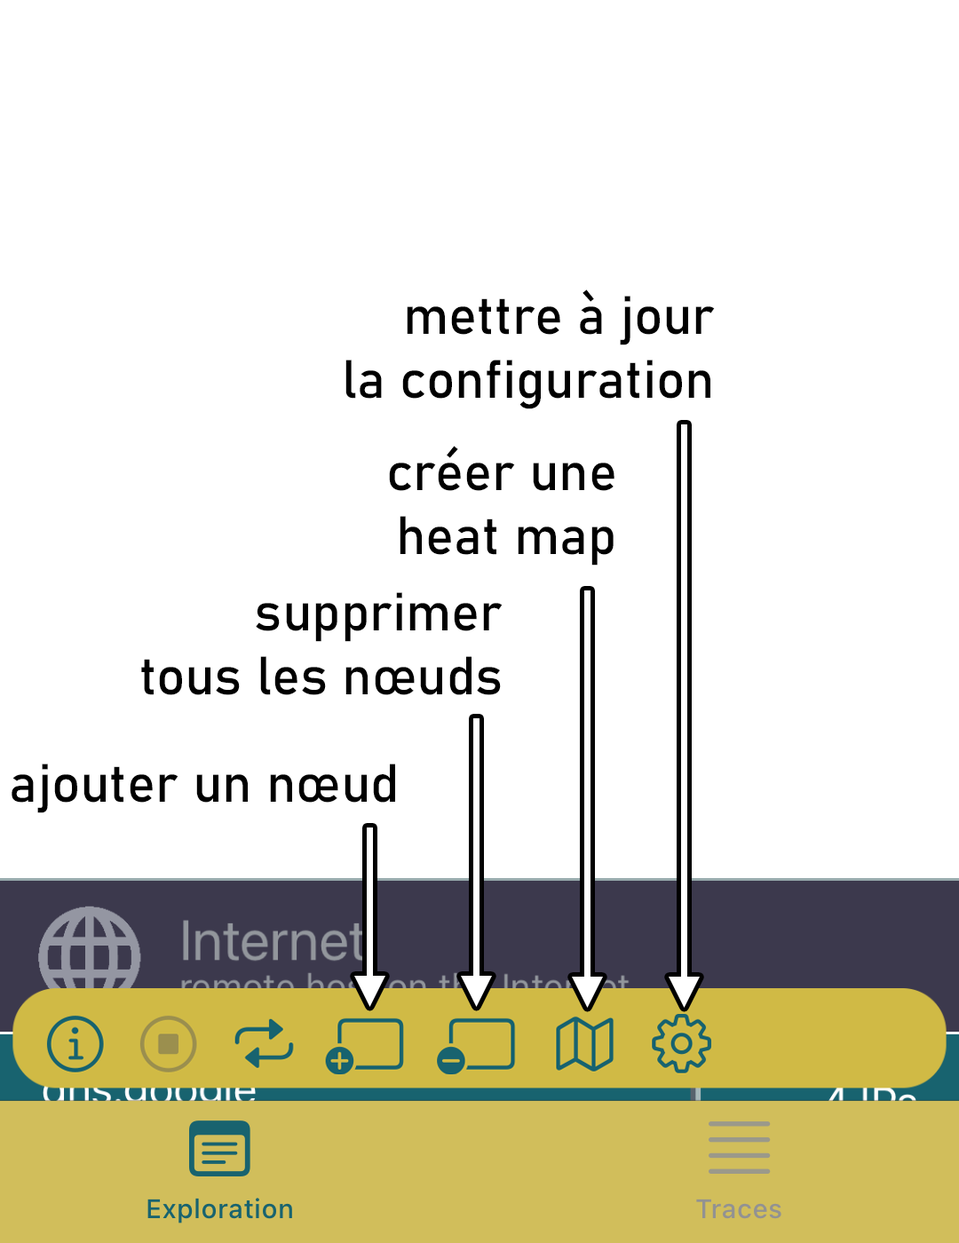
<style>
.page{position:relative;width:959px;height:1243px;background:#ffffff}
.page>*{position:absolute;margin:0}
.t1{font:53.3px "Bahnschrift";color:#000000}
</style>
<div class="page">
<p class="t1" style="left:345px;top:290px;width:370px;height:119px;text-align:right">mettre à jour<br>la configuration</p>
<p class="t1" style="left:389px;top:446px;width:226px;height:120px;text-align:right">créer une<br>heat map</p>
<p class="t1" style="left:141px;top:592px;width:362px;height:103px;text-align:right">supprimer<br>tous les nœuds</p>
<p class="t1" style="left:12px;top:764px;width:383px;height:49px">ajouter un nœud</p>
</div>
